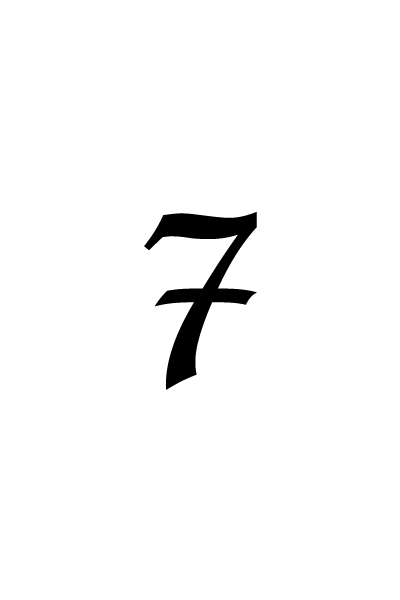
<style>
.page{position:relative;width:400px;height:600px;background:#ffffff}
.page>*{position:absolute;margin:0}
.t1{font:250px "LucidaBlackletter";color:#000000}
</style>
<div class="page">
<p class="t1" style="left:144px;top:211px;width:113px;height:179px">7</p>
</div>
